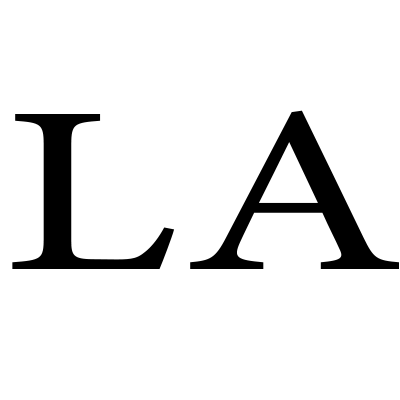
<style>
.page{position:relative;width:400px;height:400px;background:#ffffff}
.page>*{position:absolute;margin:0}
.t1{font:238.4px "MinionVariableConcept-Roman";color:#000000;scale:1.33 1}
</style>
<div class="page">
<p class="t1" style="left:12px;top:110px;width:387px;height:159px">LA</p>
</div>
